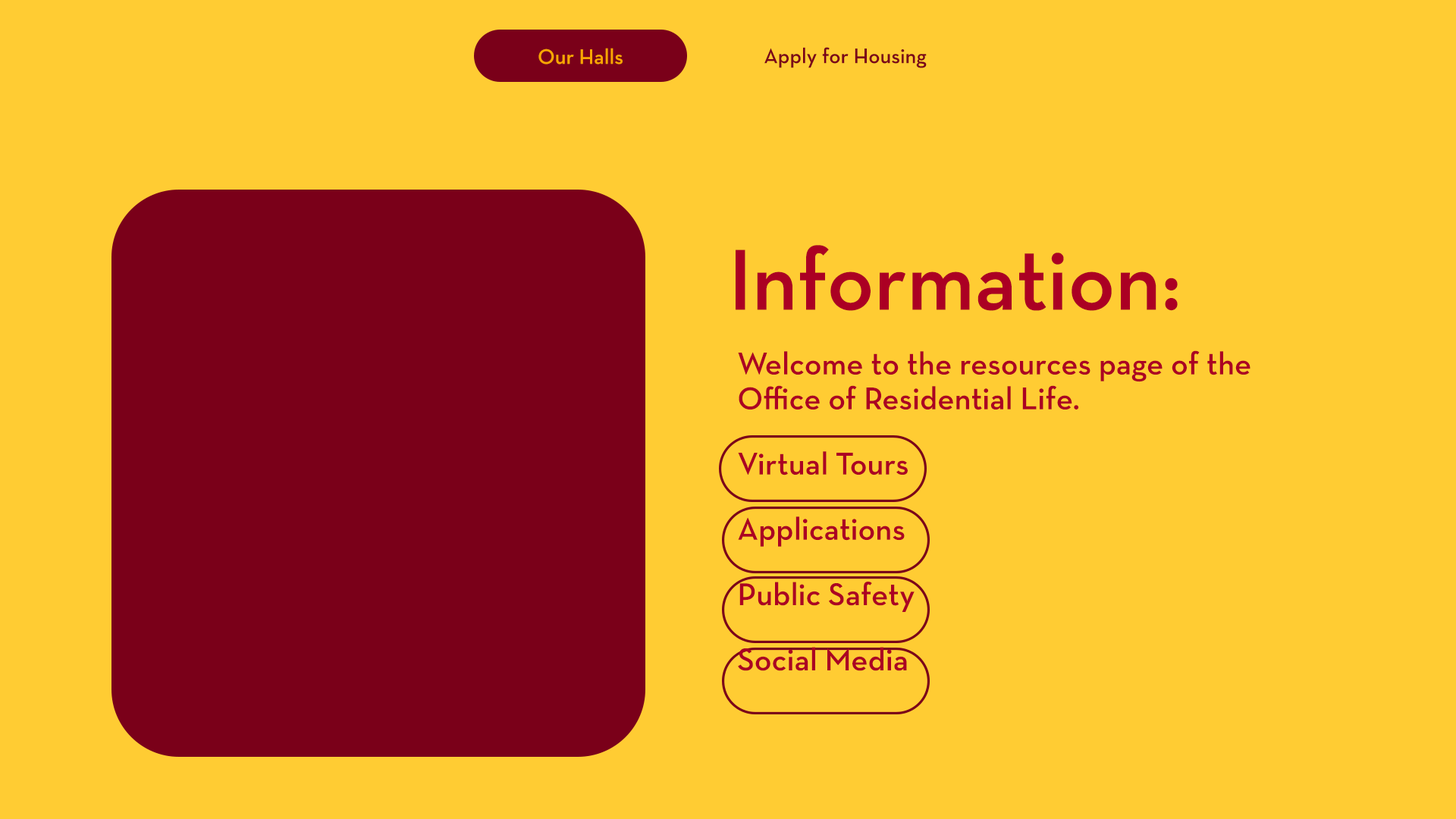
<style>
.page{position:relative;width:1456px;height:819px;background:#ffcc33}
.page>*{position:absolute;margin:0}
.t1{font:21.5px "NeutrafaceText-Demi";color:#fca702}
.t2{font:21.5px "NeutrafaceText-Demi";color:#7a0019}
.t3{font:87.7px "NeutrafaceText-Demi";color:#ab0023}
.t4{font:32.1px/34.9px "NeutrafaceText-Demi";color:#ab0023}
.t5{font:32.1px/65.3px "NeutrafaceText-Demi";color:#ab0023}
</style>
<div class="page">
<p class="t1" style="left:538px;top:48px;width:85px;height:16px">Our Halls</p>
<p class="t2" style="left:764px;top:47px;width:163px;height:21px">Apply for Housing</p>
<p class="t3" style="left:736px;top:245px;width:442px;height:66px">Information:</p>
<p class="t4" style="left:738px;top:350px;width:512px;height:321px">Welcome to the resources page of the<br>Office of Residential Life.<br><span class="t5">Virtual Tours<br>Applications<br>Public Safety<br>Social Media</span></p>
</div>
